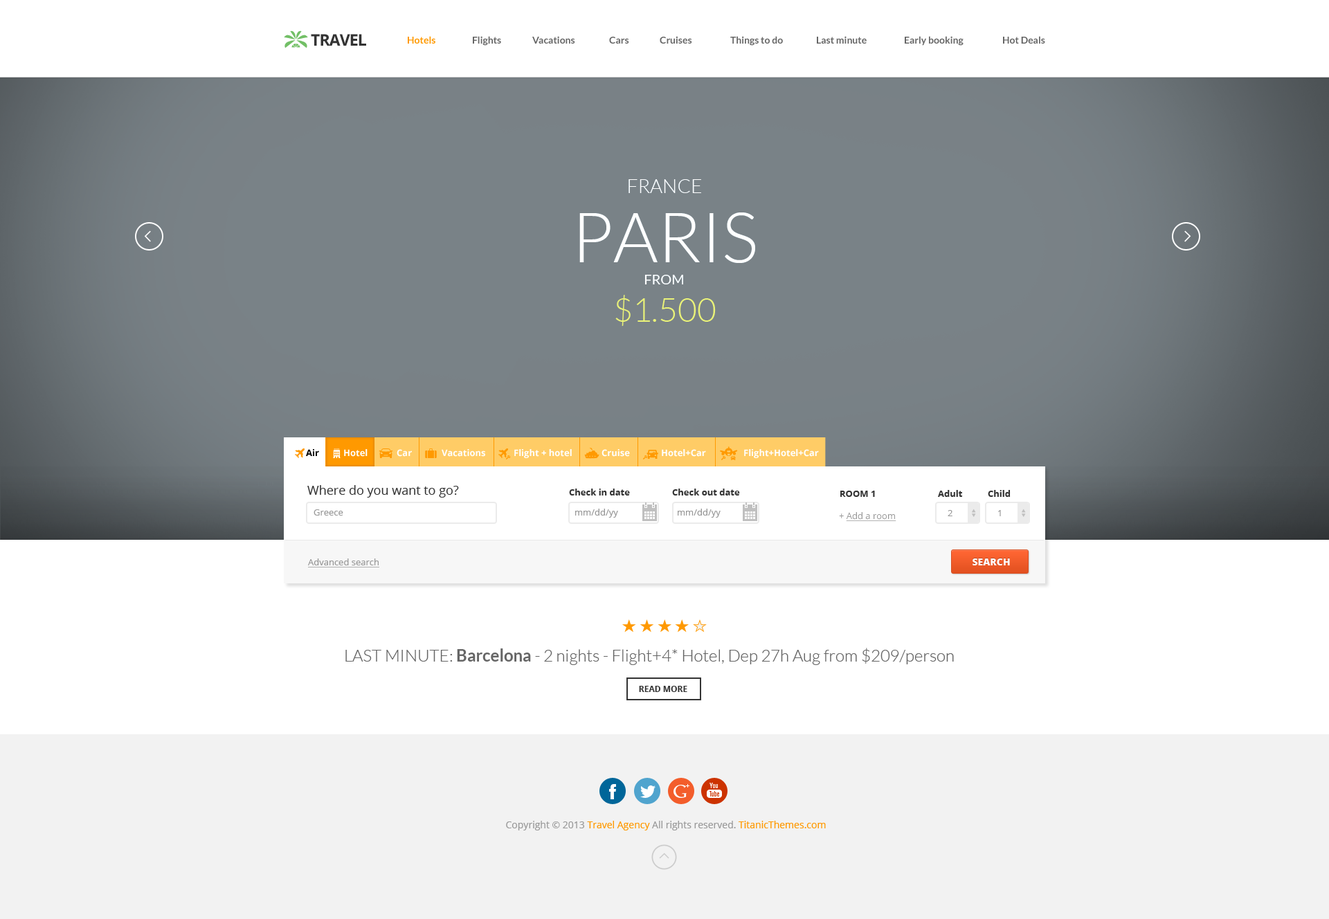
<style>
.page{position:relative;width:1329px;height:919px;background:#ffffff}
.page>*{position:absolute;margin:0}
.t1{font:16px "OpenSans-Bold";letter-spacing:-0.04em;color:#333333;text-transform:uppercase}
.t2{font:9.7px "Lato-Bold";color:#ff9900}
.t3{font:9.7px "Lato-Bold";color:#666666}
.t4{font:19.4px "Lato-Light";color:#ffffff;text-transform:uppercase}
.t5{font:69.2px "Lato-Light";color:#ffffff;text-transform:uppercase}
.t6{font:13.8px "Lato-Regular";color:#ffffff;text-transform:uppercase}
.t7{font:33.2px "Lato-Light";color:#eaf378;text-transform:uppercase}
.t8{font:9px "OpenSans-Bold";color:#000000}
.t9{font:9px "OpenSans-Bold";color:#ffffff}
.t10{font:12.5px "OpenSans";color:#333333}
.t11{font:9px "OpenSans-Bold";color:#333333}
.t12{font:9px "OpenSans";color:#999999}
.t13{font:9px "OpenSans";color:#999999;text-decoration:underline}
.t14{font:9.7px "OpenSans-Extrabold";color:#ffffff;text-transform:uppercase}
.t15{font:16.6px "Lato-Light";color:#666666}
.t16{font:16.6px "Lato-Bold";color:#666666}
.t17{font:8.3px "OpenSans-Bold";color:#333333;text-transform:uppercase}
.t18{font:9.7px "OpenSans";color:#999999}
.t19{font:9.7px "OpenSans";color:#ff9900}
</style>
<div class="page">
<p class="t1" style="left:311px;top:34px;width:55px;height:12px">travel</p>
<p class="t2" style="left:408px;top:36px;width:27px;height:8px">Hotels</p>
<p class="t3" style="left:473px;top:36px;width:28px;height:10px">Flights</p>
<p class="t3" style="left:532px;top:36px;width:43px;height:8px">Vacations</p>
<p class="t3" style="left:609px;top:37px;width:20px;height:7px">Cars</p>
<p class="t3" style="left:660px;top:36px;width:32px;height:8px">Cruises</p>
<p class="t3" style="left:730px;top:36px;width:53px;height:10px">Things to do</p>
<p class="t3" style="left:817px;top:36px;width:50px;height:8px">Last minute</p>
<p class="t3" style="left:905px;top:36px;width:59px;height:10px">Early booking</p>
<p class="t3" style="left:1003px;top:36px;width:42px;height:8px">Hot Deals</p>
<p class="t4" style="left:629px;top:179px;width:72px;height:14px">france</p>
<p class="t5" style="left:579px;top:213px;width:176px;height:50px">paris</p>
<p class="t6" style="left:645px;top:275px;width:38px;height:10px">from</p>
<p class="t7" style="left:615px;top:295px;width:101px;height:31px">$1.500</p>
<p class="t8" style="left:306px;top:449px;width:13px;height:7px">Air</p>
<p class="t9" style="left:344px;top:449px;width:24px;height:8px">Hotel</p>
<p class="t9" style="left:397px;top:449px;width:15px;height:8px">Car</p>
<p class="t9" style="left:442px;top:449px;width:43px;height:8px">Vacations</p>
<p class="t9" style="left:514px;top:449px;width:58px;height:9px">Flight + hotel</p>
<p class="t9" style="left:602px;top:449px;width:28px;height:8px">Cruise</p>
<p class="t9" style="left:662px;top:449px;width:44px;height:8px">Hotel+Car</p>
<p class="t9" style="left:744px;top:449px;width:75px;height:9px">Flight+Hotel+Car</p>
<p class="t10" style="left:307px;top:485px;width:152px;height:13px">Where do you want to go?</p>
<p class="t11" style="left:569px;top:489px;width:61px;height:7px">Check in date</p>
<p class="t11" style="left:672px;top:489px;width:68px;height:7px">Check out date</p>
<p class="t11" style="left:840px;top:491px;width:35px;height:6px">ROOM 1</p>
<p class="t11" style="left:938px;top:490px;width:25px;height:7px">Adult</p>
<p class="t11" style="left:988px;top:490px;width:23px;height:7px">Child</p>
<p class="t12" style="left:314px;top:510px;width:29px;height:6px">Greece</p>
<p class="t12" style="left:575px;top:509px;width:43px;height:9px">mm/dd/yy</p>
<p class="t12" style="left:678px;top:509px;width:43px;height:9px">mm/dd/yy</p>
<p class="t13" style="left:839px;top:512px;width:58px;height:9px"><span class="t12">+ </span>Add a room</p>
<p class="t12" style="left:948px;top:510px;width:5px;height:6px">2</p>
<p class="t12" style="left:998px;top:510px;width:3px;height:6px">1</p>
<p class="t13" style="left:308px;top:559px;width:71px;height:9px">Advanced search</p>
<p class="t14" style="left:973px;top:559px;width:37px;height:7px">Search</p>
<p class="t15" style="left:345px;top:648px;width:609px;height:17px">LAST MINUTE: <span class="t16">Barcelona</span> - 2 nights - Flight+4* Hotel, Dep 27h Aug from $209/person</p>
<p class="t17" style="left:639px;top:686px;width:48px;height:6px">Read more</p>
<p class="t18" style="left:506px;top:821px;width:320px;height:10px">Copyright © 2013 <span class="t19">Travel Agency </span>All rights reserved. <span class="t19">TitanicThemes.com</span></p>
</div>
